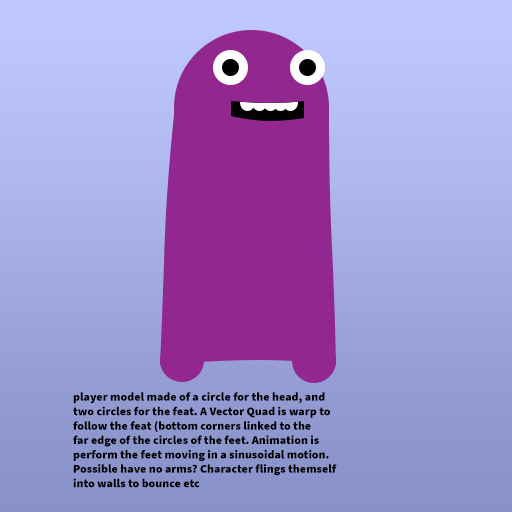
<style>
.page{position:relative;width:512px;height:512px}
.page>*{position:absolute;margin:0}
.t1{font:12px "SourceSansPro-Black";color:#000000}
</style>
<div class="page">
<p class="t1" style="left:73px;top:392px;width:264px;height:96px">player model made of a circle for the head, and <br>two circles for the feat. A Vector Quad is warp to <br>follow the feat (bottom corners linked to the<br>far edge of the circles of the feet. Animation is <br>perform the feet moving in a sinusoidal motion.<br>Possible have no arms? Character flings themself<br>into walls to bounce etc</p>
</div>
